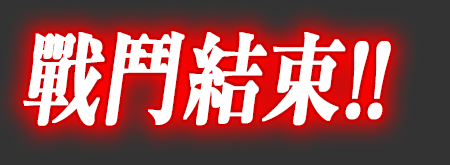
<style>
.page{position:relative;width:450px;height:165px}
.page>*{position:absolute;margin:0}
.t1{font:100px "RyuminPr6N-ExBold";color:#ffffff;font-weight:bold;font-style:italic;scale:0.78 1}
</style>
<div class="page">
<p class="t1" style="left:23px;top:31px;width:368px;height:95px">戰鬥結束!!</p>
</div>
